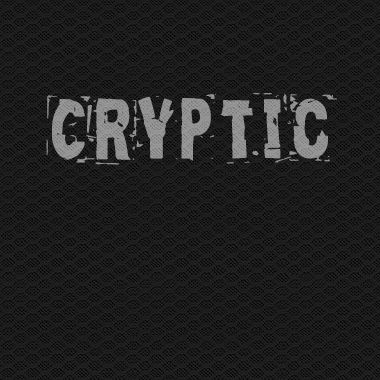
<style>
.page{position:relative;width:380px;height:380px;background:#222222}
.page>*{position:absolute;margin:0}
.t1{font:69px "Zero&Zero-Is";letter-spacing:0.12em;color:#999999}
</style>
<div class="page">
<p class="t1" style="left:46px;top:93px;width:291px;height:72px">Cryptic</p>
</div>
